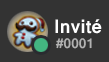
<style>
.page{position:relative;width:109px;height:62px;background:#333333}
.page>*{position:absolute;margin:0}
.t1{font:20.8px "Vrinda-Bold";color:#ffffff}
.t2{font:14.8px "Vrinda-Bold";color:#b2b2b2}
</style>
<div class="page">
<p class="t1" style="left:55px;top:19px;width:47px;height:15px">Invité</p>
<p class="t2" style="left:55px;top:38px;width:37px;height:11px">#0001</p>
</div>
